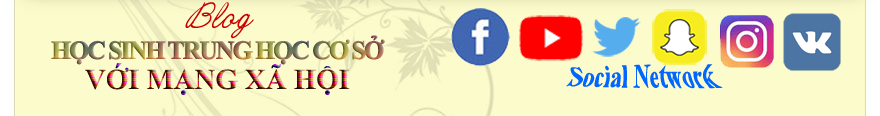
<style>
.page{position:relative;width:880px;height:116px;background:#fcfbcb}
.page>*{position:absolute;margin:0}
.t1{font:24px "Vni3Annabelle";color:#cc0000}
.t2{font:25.6px "TimesNewRomanPS-BoldMT";letter-spacing:-0.1em;font-weight:bold}
.t3{font:28.8px "TimesNewRomanPS-BoldMT"}
.t4{font:28px "TimesNewRomanPS-BoldMT";color:#0066ff}
</style>
<div class="page">
<p class="t1" style="left:185px;top:2px;width:69px;height:37px">Blog</p>
<p class="t2" style="left:51px;top:35px;width:334px;height:30px">HỌC SINH TRUNG HỌC CƠ SỞ</p>
<p class="t3" style="left:85px;top:63px;width:265px;height:32px">VỚI MẠNG XÃ HỘI</p>
<p class="t4" style="left:566px;top:64px;width:157px;height:25px">Social Network</p>
</div>
